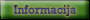
<style>
.page{position:relative;width:90px;height:20px}
.page>*{position:absolute;margin:0}
.t1{font:12px "Rockwell";color:#3a3576}
</style>
<div class="page">
<p class="t1" style="left:14px;top:5px;width:63px;height:12px">Informacija</p>
</div>
